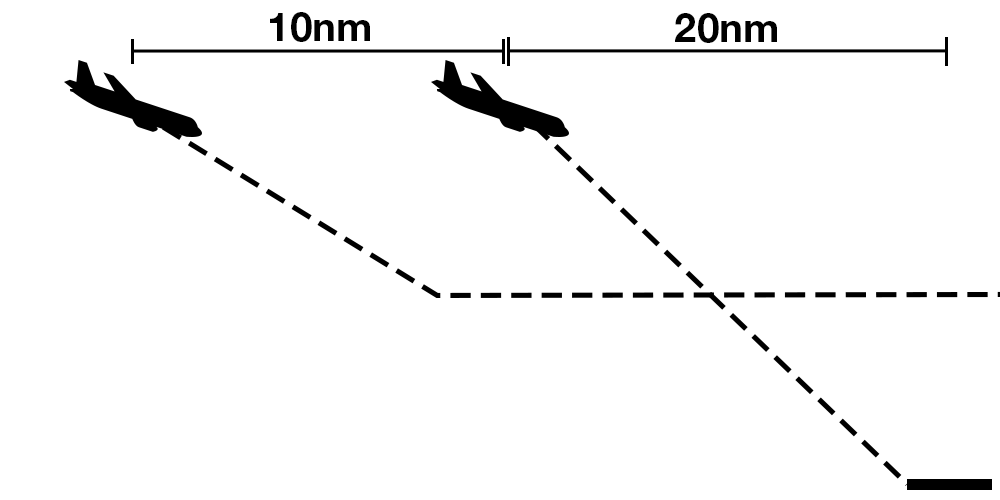
<style>
.page{position:relative;width:1000px;height:500px;background:#ffffff}
.page>*{position:absolute;margin:0}
.t1{font:40px "HelveticaNeueLTStd-Bd";color:#000000}
</style>
<div class="page">
<p class="t1" style="left:270px;top:12px;width:100px;height:30px">10nm</p>
<p class="t1" style="left:675px;top:13px;width:102px;height:30px">20nm</p>
</div>
